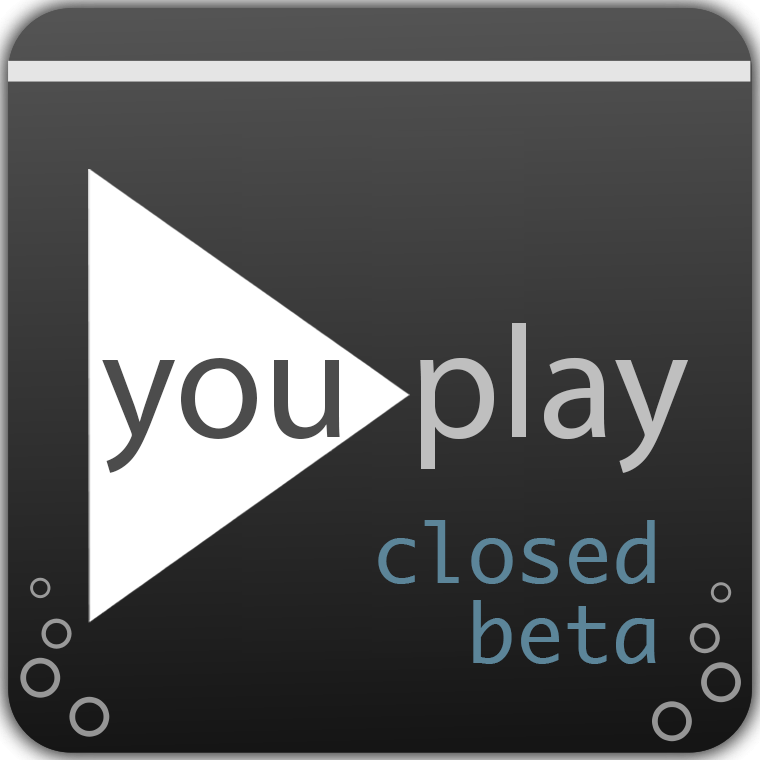
<style>
.page{position:relative;width:760px;height:760px}
.page>*{position:absolute;margin:0}
.t1{font:160px "MyriadPro-Regular";color:#bfbfbf}
.t2{font:160px "MyriadPro-Regular";color:#4c4c4c}
.t3{font:80px/80px "Monaco";color:#5c8599}
</style>
<div class="page">
<p class="t1" style="left:420px;top:323px;width:268px;height:150px">play</p>
<p class="t2" style="left:102px;top:358px;width:238px;height:115px">you</p>
<p class="t3" style="left:378px;top:520px;width:278px;height:144px;text-align:right">closed<br>beta</p>
</div>
